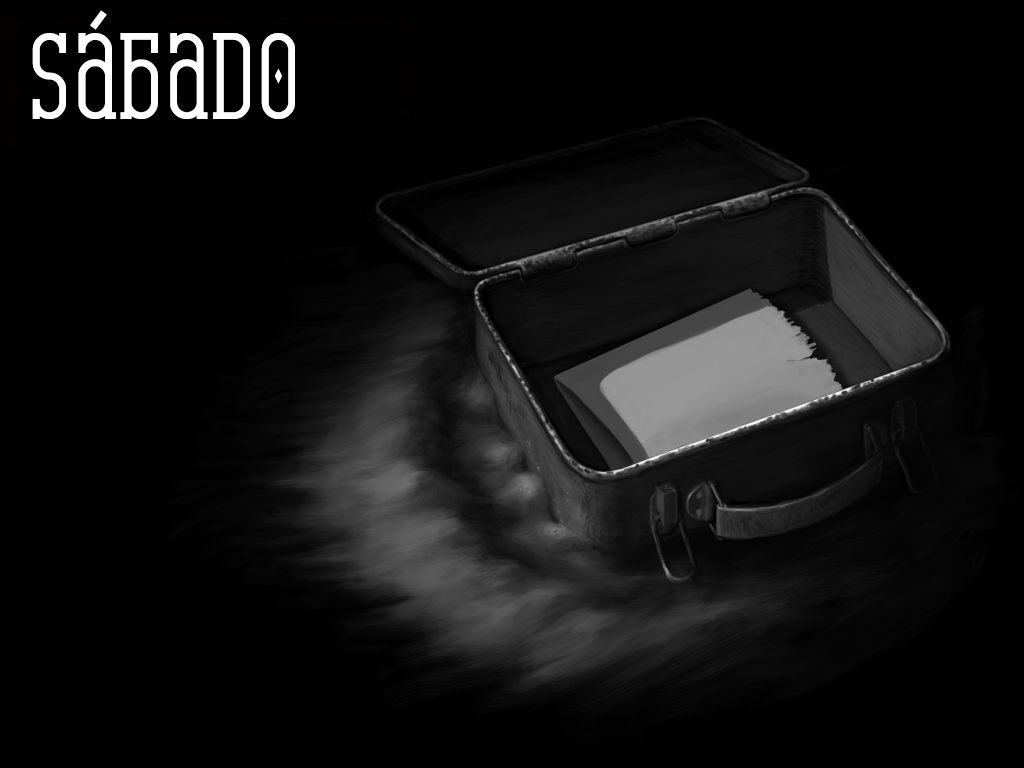
<style>
.page{position:relative;width:1024px;height:768px;background:#000000}
.page>*{position:absolute;margin:0}
.t1{font:132px "CatharsisRequiemBold";letter-spacing:-0.003em;color:#ffffff}
</style>
<div class="page">
<p class="t1" style="left:32px;top:10px;width:263px;height:109px">sábado</p>
</div>
